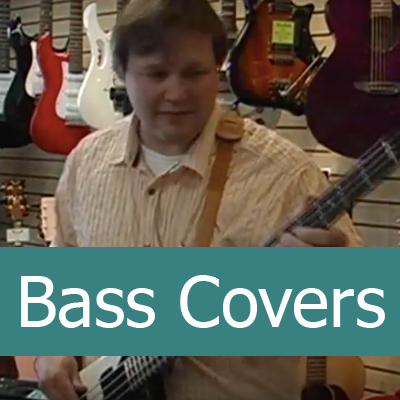
<style>
.page{position:relative;width:400px;height:400px;background:#398180}
.page>*{position:absolute;margin:0}
.t1{font:70px "Tahoma";color:#ffffff}
</style>
<div class="page">
<p class="t1" style="left:21px;top:275px;width:364px;height:53px">Bass Covers</p>
</div>
